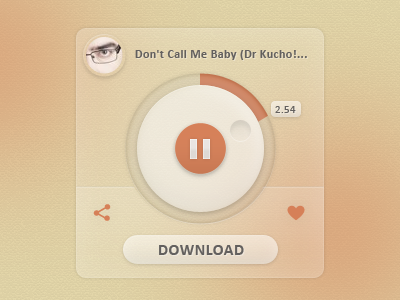
<style>
.page{position:relative;width:400px;height:300px}
.page>*{position:absolute;margin:0}
.t1{font:12px "Calibri-Bold";letter-spacing:0.032em;color:#63605e}
.t2{font:11px "Calibri";letter-spacing:0.032em;color:#63605e}
.t3{font:16px "Calibri-Bold";letter-spacing:0.032em;color:#63605e;text-transform:uppercase}
</style>
<div class="page">
<p class="t1" style="left:135px;top:50px;width:172px;height:10px">Don't Call Me Baby (Dr Kucho!...</p>
<p class="t2" style="left:275px;top:106px;width:21px;height:7px">2.54</p>
<p class="t3" style="left:159px;top:245px;width:85px;height:10px">Download</p>
</div>
